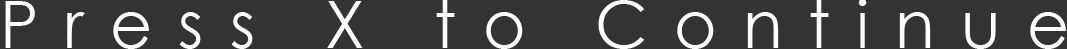
<style>
.page{position:relative;width:1067px;height:49px;background:#333333}
.page>*{position:absolute;margin:0}
.t1{font:15.6px "CenturyGothic";letter-spacing:0.4em;color:#ffffff}
</style>
<div class="page">
<p class="t1" style="left:5px;top:0px;width:1061px;height:49px;text-align:center">Press X to Continue</p>
</div>
